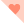
<style>
.page{position:relative;width:24px;height:24px;background:#ffffff}
.page>*{position:absolute;margin:0}
.t1{font:14.1px "KozGoStd-ExtraLight";letter-spacing:0.4em;color:#ff8b71}
</style>
<div class="page">
<p class="t1" style="left:8px;top:4px;width:13px;height:12px">♥</p>
</div>
